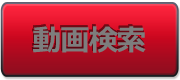
<style>
.page{position:relative;width:180px;height:80px}
.page>*{position:absolute;margin:0}
.t1{font:29.7px "Meiryo-Bold";letter-spacing:-0.05em;color:#7d7d7d;text-transform:uppercase}
</style>
<div class="page">
<p class="t1" style="left:32px;top:26px;width:114px;height:27px">動画検索</p>
</div>
